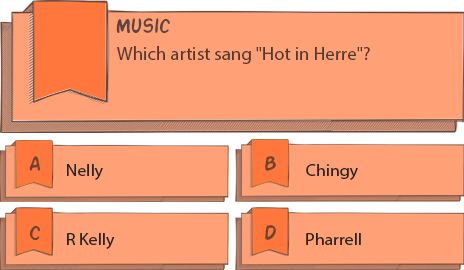
<style>
.page{position:relative;width:464px;height:270px;background:#ffa077}
.page>*{position:absolute;margin:0}
.t1{font:22.2px "ActionMan";color:#6b4332}
.t2{font:18.7px "MyriadPro-Regular";color:#4f3a32}
.t3{font:16.7px "MyriadPro-Regular";color:#262626;scale:1.07 1}
</style>
<div class="page">
<p class="t1" style="left:116px;top:18px;width:54px;height:15px">Music</p>
<p class="t2" style="left:117px;top:46px;width:253px;height:18px">Which artist sang "Hot in Herre"?</p>
<p class="t1" style="left:29px;top:156px;width:12px;height:15px">A</p>
<p class="t1" style="left:265px;top:156px;width:11px;height:15px">B</p>
<p class="t3" style="left:67px;top:164px;width:36px;height:16px">Nelly</p>
<p class="t3" style="left:306px;top:164px;width:52px;height:16px">Chingy</p>
<p class="t1" style="left:29px;top:226px;width:11px;height:14px">C</p>
<p class="t3" style="left:67px;top:233px;width:48px;height:16px">R Kelly</p>
<p class="t1" style="left:265px;top:225px;width:11px;height:15px">D</p>
<p class="t3" style="left:306px;top:233px;width:55px;height:12px">Pharrell</p>
</div>
